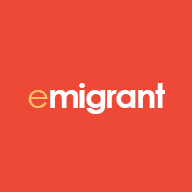
<style>
.page{position:relative;width:192px;height:192px;background:#ee4837}
.page>*{position:absolute;margin:0}
.t1{font:33.4px "CenturyGothic-Bold";letter-spacing:-0.04em;color:#ffffff}
.t2{font:33.4px "CenturyGothic";letter-spacing:-0.04em;color:#fec264}
</style>
<div class="page">
<p class="t1" style="left:28px;top:83px;width:137px;height:31px"><span class="t2">e</span>migrant</p>
</div>
